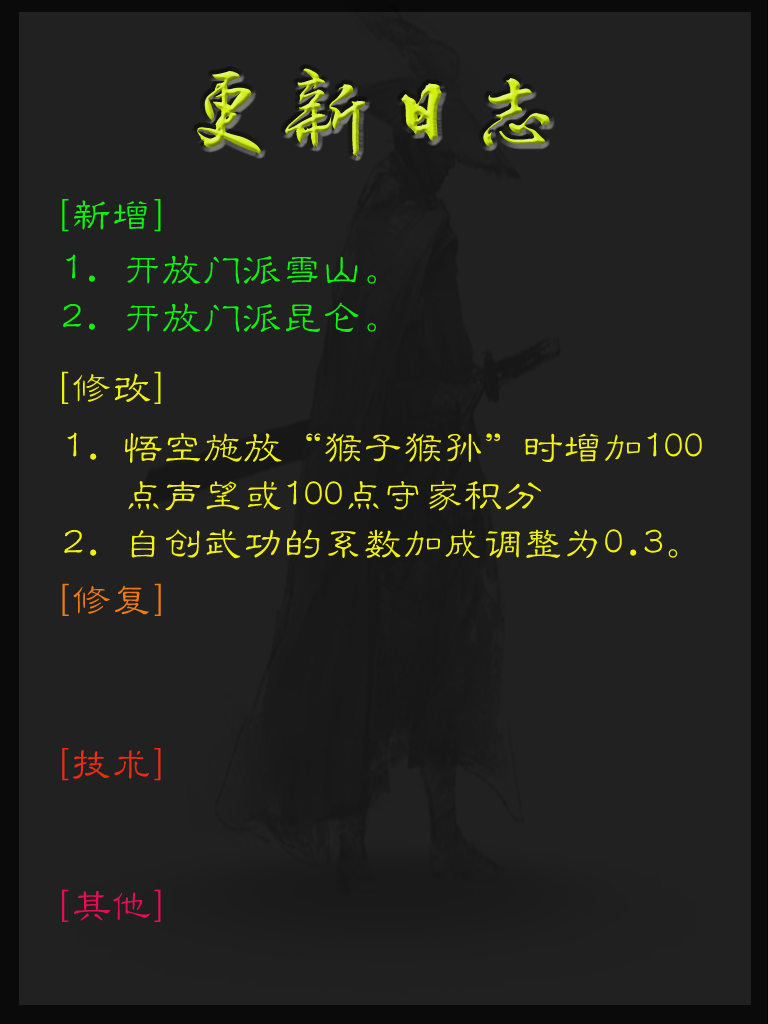
<style>
.page{position:relative;width:768px;height:1024px;background:#212121}
.page>*{position:absolute;margin:0}
.t1{font:96px "FZZJ-LJDFONT"}
.t2{font:40px "HYf2gj";color:#11f011}
.t3{font:40px "HYf2gj";color:#f0f011}
.t4{font:40px "HYf2gj";color:#f07a11}
.t5{font:40px "HYf2gj";color:#f02b11}
.t6{font:40px "HYf2gj";color:#e20f55}
</style>
<div class="page">
<p class="t1" style="left:197px;top:68px;width:353px;height:89px">更新日志</p>
<p class="t2" style="left:62px;top:199px;width:99px;height:33px">[新增]</p>
<p class="t2" style="left:63px;top:254px;width:313px;height:78px;text-align:justify">1. 开放门派雪山。<br>2. 开放门派昆仑。</p>
<p class="t3" style="left:62px;top:371px;width:99px;height:33px">[修改]</p>
<p class="t3" style="left:64px;top:432px;width:638px;height:127px;text-align:justify">1. 悟空施放“猴子猴孙”时增加100<br>   点声望或100点守家积分<br>2. 自创武功的系数加成调整为0.3。</p>
<p class="t4" style="left:62px;top:583px;width:99px;height:33px">[修复]</p>
<p class="t5" style="left:62px;top:748px;width:99px;height:33px">[技术]</p>
<p class="t6" style="left:62px;top:889px;width:99px;height:33px">[其他]</p>
</div>
